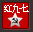
<style>
.page{position:relative;width:33px;height:32px;background:#c50000}
.page>*{position:absolute;margin:0}
.t1{font:10.4px "SimSun";letter-spacing:-0.25em;color:#ffffff}
</style>
<div class="page">
<p class="t1" style="left:4px;top:4px;width:25px;height:9px">红九七</p>
</div>
